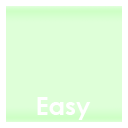
<style>
.page{position:relative;width:128px;height:128px;background:#deffd8}
.page>*{position:absolute;margin:0}
.t1{font:25px "CenturyGothic-Bold";color:#ffffff}
</style>
<div class="page">
<p class="t1" style="left:37px;top:97px;width:54px;height:23px">Easy</p>
</div>
